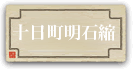
<style>
.page{position:relative;width:133px;height:69px}
.page>*{position:absolute;margin:0}
.t1{font:17.3px "HiraMinPro-W6";color:#ffffff}
</style>
<div class="page">
<p class="t1" style="left:12px;top:24px;width:104px;height:17px">十日町明石縮</p>
</div>
